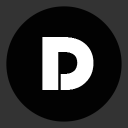
<style>
.page{position:relative;width:128px;height:128px;background:#020202}
.page>*{position:absolute;margin:0}
.t1{font:80px "Bauhaus93";color:#ffffff}
</style>
<div class="page">
<p class="t1" style="left:42px;top:37px;width:52px;height:53px">D</p>
</div>
